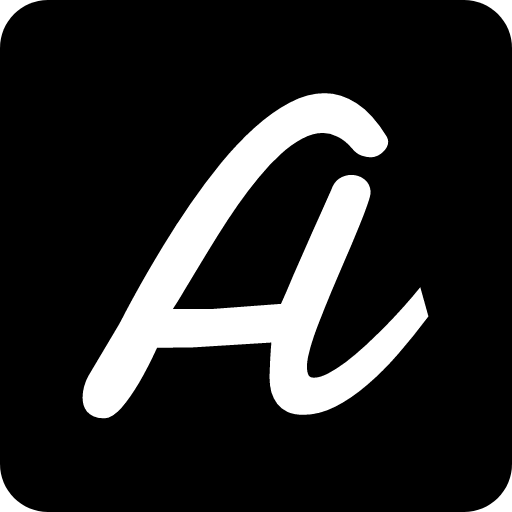
<style>
.page{position:relative;width:512px;height:512px;background:#000000}
.page>*{position:absolute;margin:0}
.t1{font:450px "Damion";color:#ffffff}
</style>
<div class="page">
<p class="t1" style="left:82px;top:93px;width:347px;height:326px">A</p>
</div>
